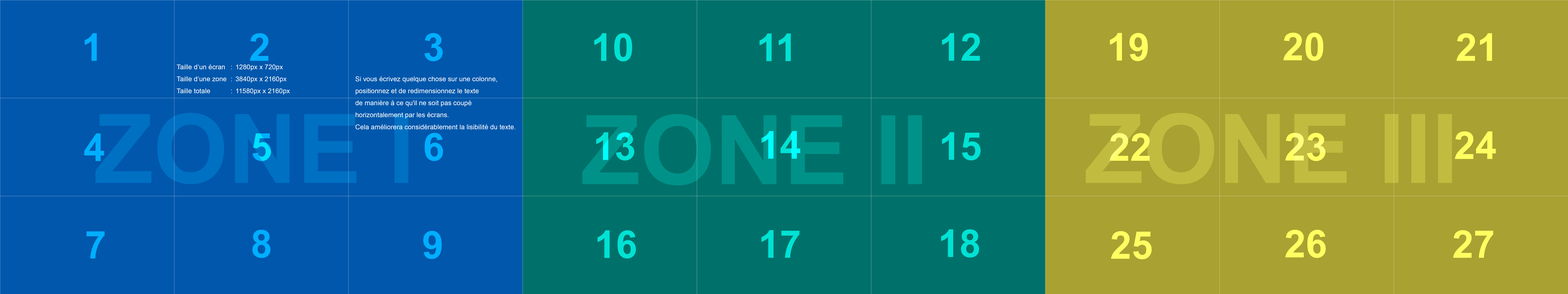
<style>
.page{position:relative;width:1568px;height:294px;background:#a9a131}
.page>*{position:absolute;margin:0}
.t1{font:38.4px "Arial-BoldMT";color:#00aeff}
.t2{font:38.4px "Arial-BoldMT";color:#00e2d4}
.t3{font:38.4px "Arial-BoldMT";color:#ffff62}
.t4{font:6.7px/12px "ArialMT";color:#ffffff}
.t5{font:96px "Arial-BoldMT";color:#0070c3}
.t6{font:96px "Arial-BoldMT";color:#c1bb3f}
.t7{font:96px "Arial-BoldMT";color:#009289}
.t8{font:38.4px "Arial-BoldMT"}
.t9{font:38.4px "Arial-BoldMT";color:#00ffff}
</style>
<div class="page">
<p class="t1" style="left:85px;top:33px;width:12px;height:28px">1</p>
<p class="t1" style="left:250px;top:33px;width:18px;height:28px">2</p>
<p class="t1" style="left:424px;top:33px;width:19px;height:28px">3</p>
<p class="t2" style="left:594px;top:33px;width:38px;height:28px">10</p>
<p class="t2" style="left:759px;top:33px;width:32px;height:28px">11</p>
<p class="t2" style="left:942px;top:33px;width:38px;height:28px">12</p>
<p class="t3" style="left:1110px;top:33px;width:38px;height:28px">19</p>
<p class="t3" style="left:1283px;top:33px;width:40px;height:28px">20</p>
<p class="t3" style="left:1457px;top:33px;width:35px;height:28px">21</p>
<p class="t4" style="left:177px;top:64px;width:113px;height:31px">Taille d’un écran  :  1280px x 720px<br>Taille d’une zone  :  3840px x 2160px<br>Taille totale     :  11580px x 2160px</p>
<p class="t4" style="left:355px;top:76px;width:160px;height:53px">Si vous écrivez quelque chose sur une colonne, <br>positionnez et de redimensionnez le texte <br>de manière à ce qu'il ne soit pas coupé <br>horizontalement par les écrans. <br>Cela améliorera considérablement la lisibilité du texte.</p>
<p class="t5" style="left:95px;top:113px;width:313px;height:71px">ZONE I</p>
<p class="t6" style="left:1086px;top:113px;width:366px;height:71px">ZONE III</p>
<p class="t7" style="left:582px;top:114px;width:340px;height:71px">ZONE II</p>
<p class="t1" style="left:84px;top:133px;width:20px;height:28px">4</p>
<p class="t8" style="left:252px;top:133px;width:19px;height:28px">5</p>
<p class="t1" style="left:425px;top:133px;width:18px;height:28px">6</p>
<p class="t8" style="left:596px;top:132px;width:38px;height:28px">13</p>
<p class="t9" style="left:761px;top:131px;width:39px;height:28px">14</p>
<p class="t2" style="left:942px;top:132px;width:39px;height:28px">15</p>
<p class="t3" style="left:1110px;top:133px;width:40px;height:28px">22</p>
<p class="t8" style="left:1285px;top:133px;width:40px;height:28px">23</p>
<p class="t3" style="left:1455px;top:131px;width:41px;height:28px">24</p>
<p class="t1" style="left:86px;top:231px;width:19px;height:27px">7</p>
<p class="t1" style="left:252px;top:230px;width:19px;height:28px">8</p>
<p class="t1" style="left:423px;top:231px;width:19px;height:28px">9</p>
<p class="t2" style="left:598px;top:230px;width:38px;height:28px">16</p>
<p class="t2" style="left:761px;top:230px;width:39px;height:28px">17</p>
<p class="t2" style="left:941px;top:229px;width:38px;height:29px">18</p>
<p class="t3" style="left:1111px;top:231px;width:41px;height:28px">25</p>
<p class="t3" style="left:1285px;top:230px;width:41px;height:28px">26</p>
<p class="t3" style="left:1453px;top:230px;width:40px;height:28px">27</p>
</div>
